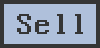
<style>
.page{position:relative;width:100px;height:48px;background:#afc0db}
.page>*{position:absolute;margin:0}
.t1{font:32px "PerfectDOSVGA437Win";color:#353535}
</style>
<div class="page">
<p class="t1" style="left:17px;top:14px;width:66px;height:20px">Sell</p>
</div>
